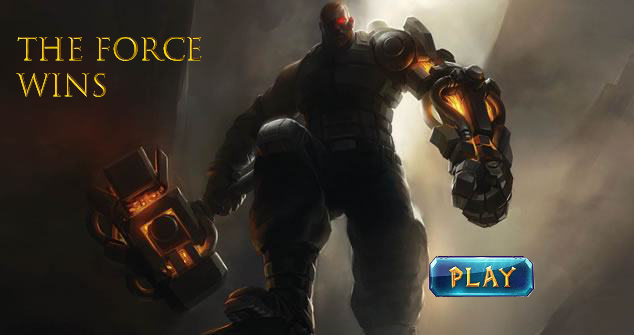
<style>
.page{position:relative;width:634px;height:335px}
.page>*{position:absolute;margin:0}
.t1{font:30px "TrajanColor-Concept"}
</style>
<div class="page">
<p class="t1" style="left:16px;top:36px;width:186px;height:61px">The Force Wins</p>
</div>
